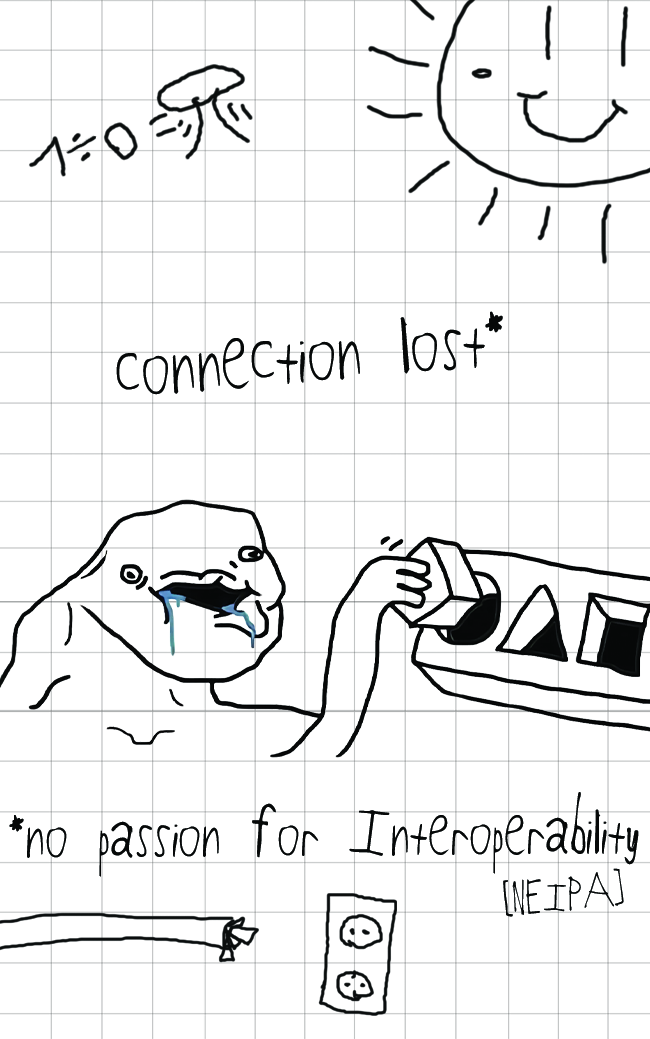
<style>
.page{position:relative;width:650px;height:1039px;background:#ffffff}
.page>*{position:absolute;margin:0}
.t1{font:77.4px "PizzaismyFAVORITE";color:#060808}
.t2{font:60.8px "PizzaismyFAVORITE";color:#060808}
.t3{font:36.5px "PizzaismyFAVORITE";color:#060808}
</style>
<div class="page">
<p class="t1" style="left:116px;top:311px;width:387px;height:84px;rotate:-5deg">connection lost*</p>
<p class="t2" style="left:9px;top:792px;width:630px;height:85px">*no passion for Interoperability</p>
<p class="t3" style="left:503px;top:868px;width:121px;height:49px;rotate:-5deg">[NEIPA]</p>
</div>
